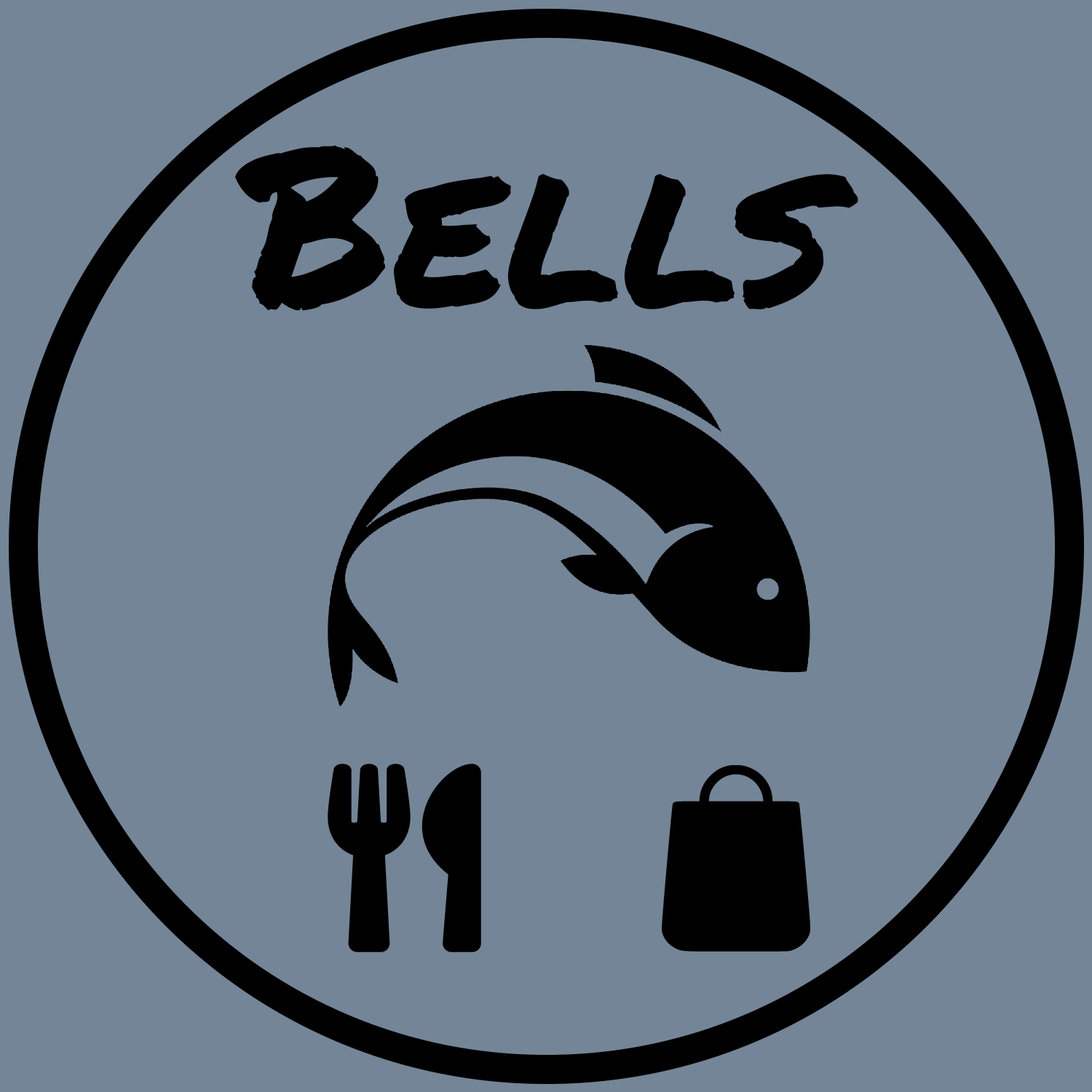
<style>
.page{position:relative;width:1092px;height:1092px;background:#748597}
.page>*{position:absolute;margin:0}
.t1{font:218.4px "PermanentMarker-Regular";color:#000000}
</style>
<div class="page">
<p class="t1" style="left:234px;top:145px;width:624px;height:166px">Bells</p>
</div>
